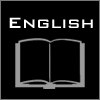
<style>
.page{position:relative;width:100px;height:100px;background:#000000}
.page>*{position:absolute;margin:0}
.t1{font:20px "BankGothicBT-Medium";color:#ffffff}
</style>
<div class="page">
<p class="t1" style="left:9px;top:17px;width:84px;height:11px">English</p>
</div>
